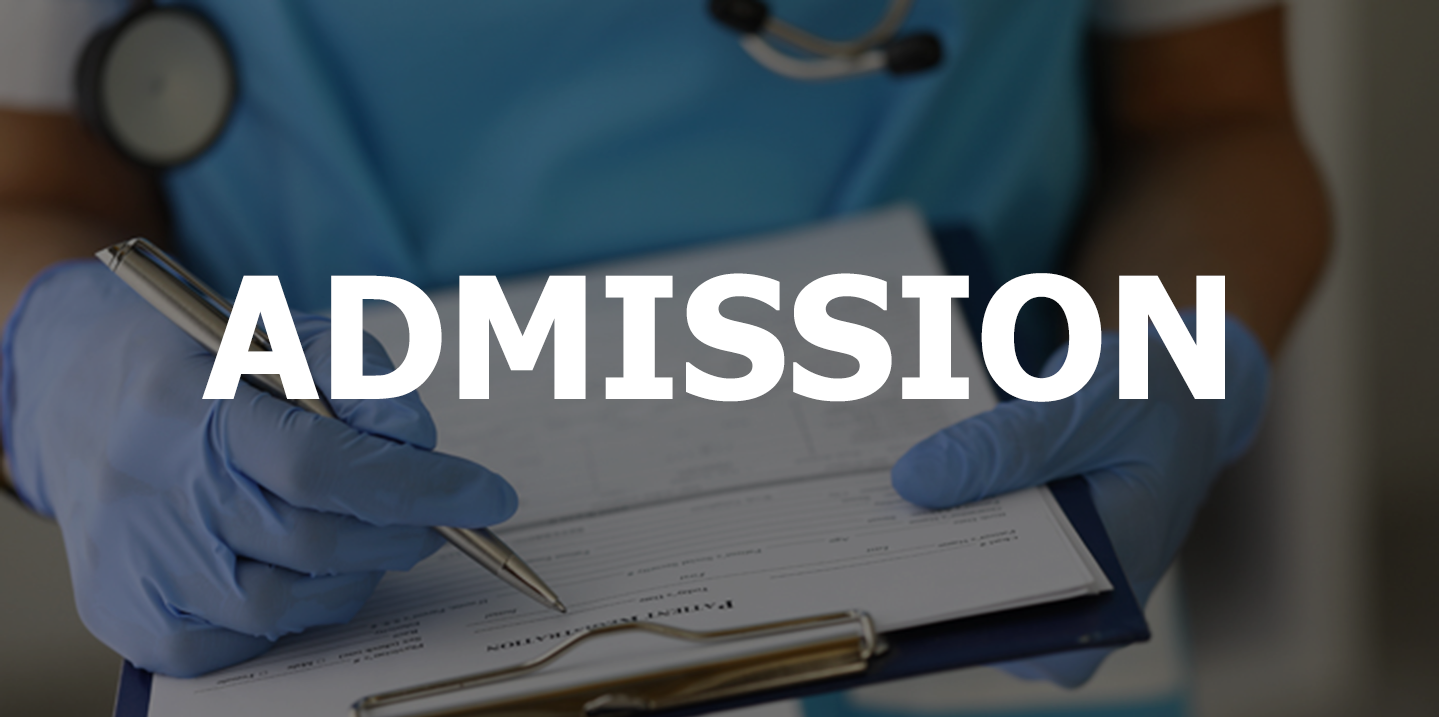
<style>
.page{position:relative;width:1439px;height:717px}
.page>*{position:absolute;margin:0}
.t1{font:169.3px "Tahoma-Bold";color:#ffffff}
</style>
<div class="page">
<p class="t1" style="left:202px;top:273px;width:1023px;height:129px">ADMISSION</p>
</div>
